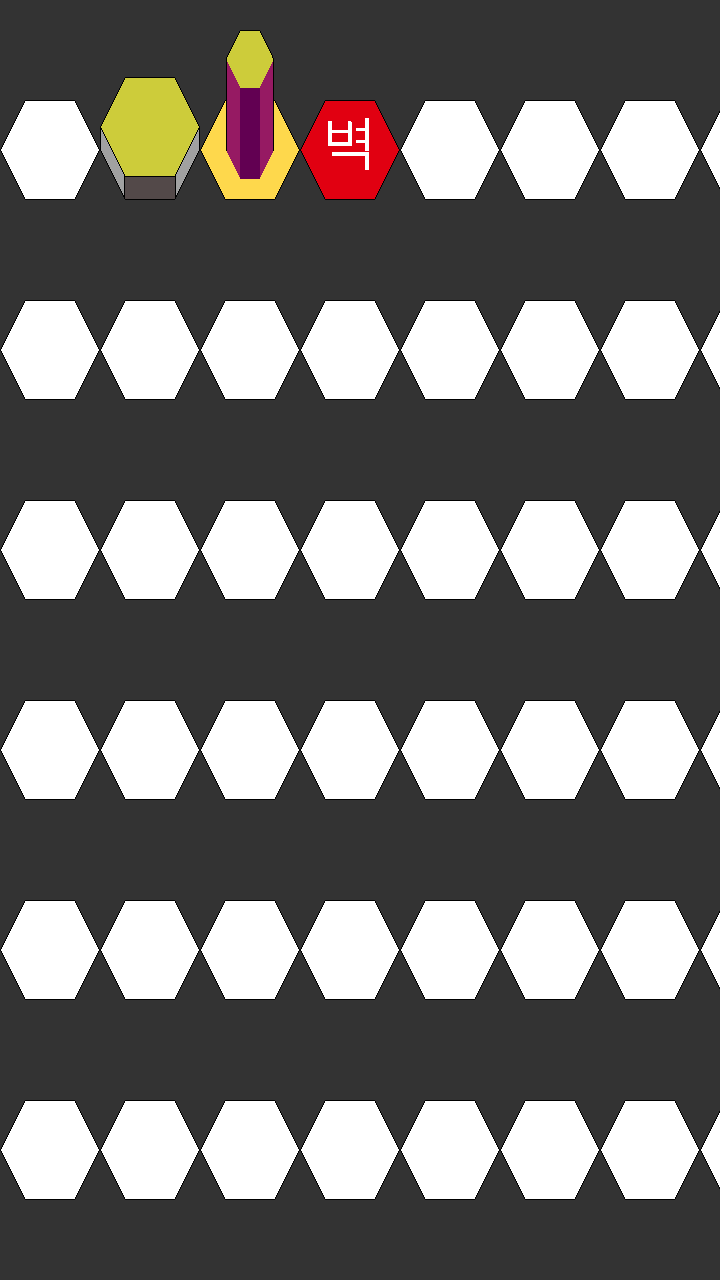
<style>
.page{position:relative;width:720px;height:1280px;background:#333333}
.page>*{position:absolute;margin:0}
.t1{font:56.6px "AppleGothic";color:#ffffff}
</style>
<div class="page">
<p class="t1" style="left:328px;top:118px;width:41px;height:52px">벽</p>
</div>
